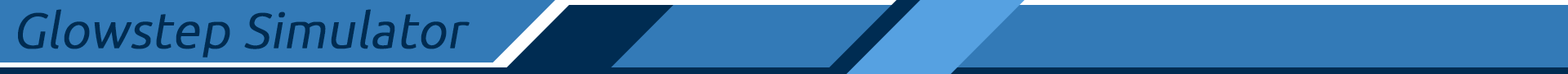
<style>
.page{position:relative;width:1568px;height:74px;background:#337ab7}
.page>*{position:absolute;margin:0}
.t1{font:49px "Ubuntu-Light";color:#002c52;font-weight:bold;font-style:italic}
</style>
<div class="page">
<p class="t1" style="left:18px;top:9px;width:452px;height:48px">Glowstep Simulator</p>
</div>
